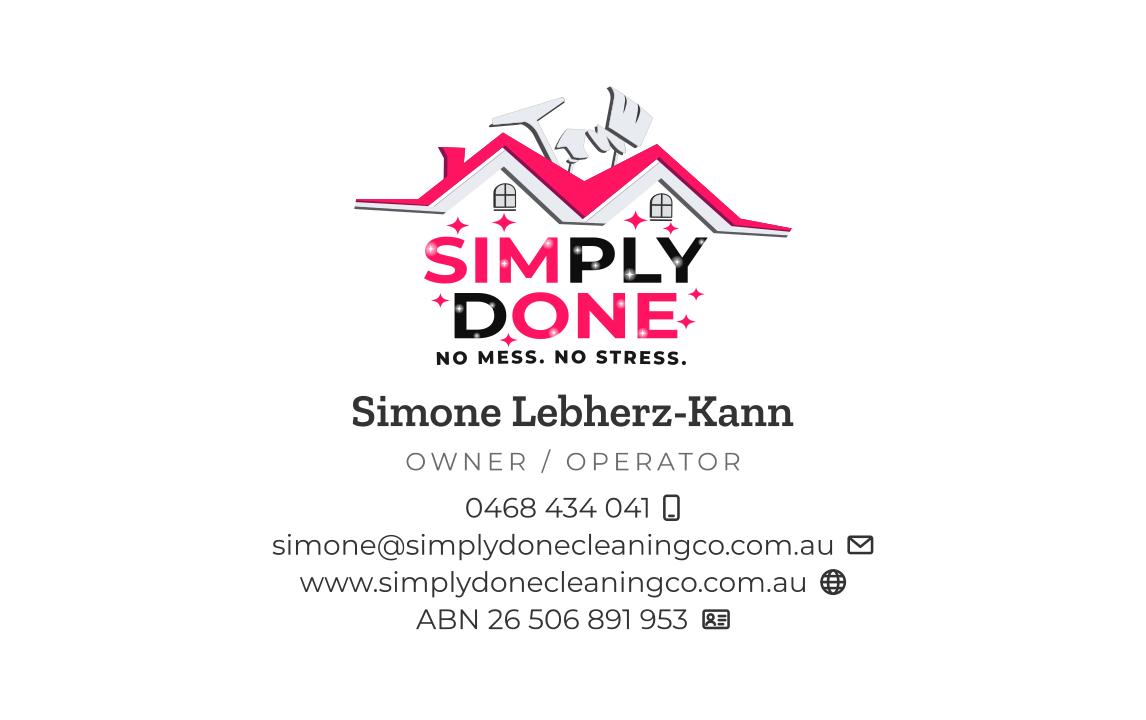
<style>
.page{position:relative;width:1146px;height:720px;background:#ffffff}
.page>*{position:absolute;margin:0}
.t1{font:45.8px "ZillaSlab-SemiBold";color:#333333}
.t2{font:25px "Montserrat-Regular";letter-spacing:0.18em;color:#6b6b6b}
.t3{font:28.1px "Montserrat-Regular";color:#333333}
</style>
<div class="page">
<p class="t1" style="left:352px;top:394px;width:442px;height:33px">Simone Lebherz-Kann</p>
<p class="t2" style="left:406px;top:449px;width:334px;height:24px">OWNER / OPERATOR</p>
<p class="t3" style="left:466px;top:497px;width:182px;height:21px">0468 434 041</p>
<p class="t3" style="left:272px;top:533px;width:561px;height:28px">simone@simplydonecleaningco.com.au</p>
<p class="t3" style="left:299px;top:571px;width:506px;height:27px">www.simplydonecleaningco.com.au</p>
<p class="t3" style="left:416px;top:609px;width:271px;height:21px">ABN 26 506 891 953</p>
</div>
